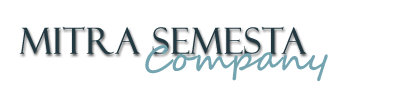
<style>
.page{position:relative;width:400px;height:110px;background:#ffffff}
.page>*{position:absolute;margin:0}
.t1{font:36px "FelixTitlingMT";letter-spacing:0.025em;color:#223942}
.t2{font:36px "SegoeScript";letter-spacing:0.025em;color:#73a4af}
</style>
<div class="page">
<p class="t1" style="left:19px;top:26px;width:288px;height:28px">Mitra semesta</p>
<p class="t2" style="left:145px;top:45px;width:183px;height:36px">Company</p>
</div>
